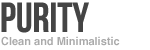
<style>
.page{position:relative;width:150px;height:50px;background:#ffffff}
.page>*{position:absolute;margin:0}
.t1{font:42px "BebasNeue";color:#444444;text-transform:uppercase}
.t2{font:11px "Helvetica-Bold";color:#aaaaaa}
</style>
<div class="page">
<p class="t1" style="left:1px;top:2px;width:88px;height:31px">Purity</p>
<p class="t2" style="left:1px;top:36px;width:119px;height:10px">Clean and Minimalistic</p>
</div>
